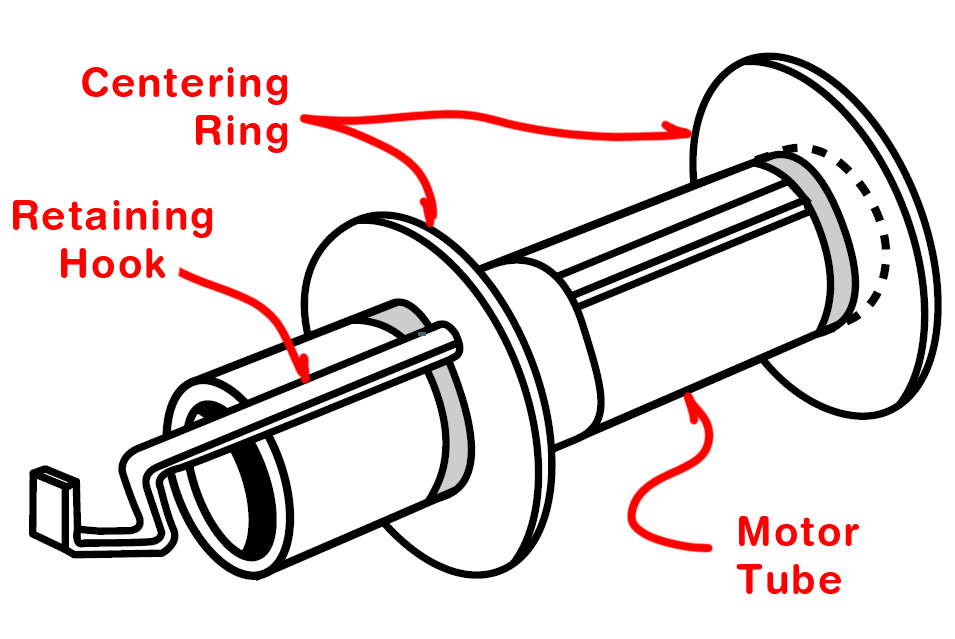
<style>
.page{position:relative;width:955px;height:639px;background:#ffffff}
.page>*{position:absolute;margin:0}
.t1{font:40px "HelveticaRounded-Bold";letter-spacing:0.05em;color:#ff0000}
</style>
<div class="page">
<p class="t1" style="left:82px;top:67px;width:206px;height:86px;text-align:right">Centering<br>Ring</p>
<p class="t1" style="left:13px;top:200px;width:200px;height:78px;text-align:center">Retaining<br>Hook</p>
<p class="t1" style="left:736px;top:516px;width:123px;height:78px">Motor<br>Tube</p>
</div>
